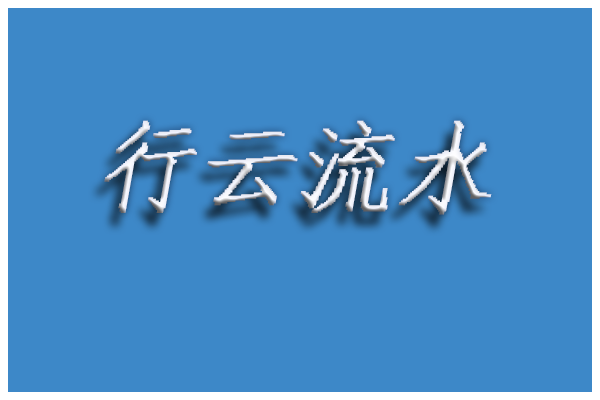
<style>
.page{position:relative;width:600px;height:400px;background:#3d88c8}
.page>*{position:absolute;margin:0}
.t1{font:100px "·ÂËÎ";font-weight:bold;font-style:italic}
</style>
<div class="page">
<p class="t1" style="left:104px;top:120px;width:388px;height:95px">行云流水</p>
</div>
